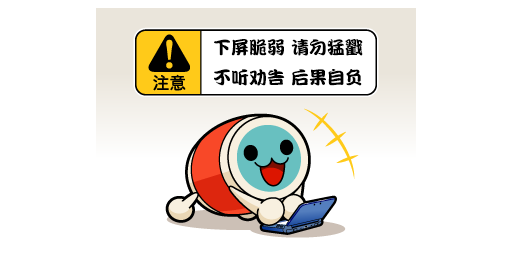
<style>
.page{position:relative;width:512px;height:256px;background:#ffffff}
.page>*{position:absolute;margin:0}
.t1{font:18px/30px "DFPKanTingLiuW9";color:#000000}
</style>
<div class="page">
<p class="t1" style="left:214px;top:39px;width:149px;height:47px;text-align:center">下屏脆弱 请勿猛戳<br>不听劝告 后果自负</p>
</div>
